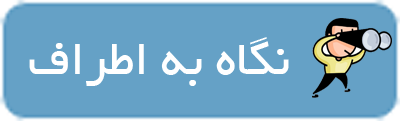
<style>
.page{position:relative;width:400px;height:121px;background:#65a1c6}
.page>*{position:absolute;margin:0}
.t1{font:53.3px "BYekan";color:#ffffff}
</style>
<div class="page">
<p class="t1" style="left:29px;top:37px;width:260px;height:49px">نگاه به اطراف</p>
</div>
